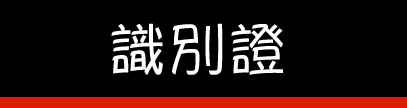
<style>
.page{position:relative;width:407px;height:108px;background:#000000}
.page>*{position:absolute;margin:0}
.t1{font:60px "YuppyTC-Regular";color:#ffffff}
</style>
<div class="page">
<p class="t1" style="left:111px;top:23px;width:172px;height:52px">識別證</p>
</div>
